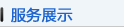
<style>
.page{position:relative;width:124px;height:27px;background:#f0f5fa}
.page>*{position:absolute;margin:0}
.t1{font:15px "MicrosoftYaHei";color:#1f65ce;text-transform:uppercase;font-weight:bold}
</style>
<div class="page">
<p class="t1" style="left:11px;top:7px;width:62px;height:16px">服务展示</p>
</div>
